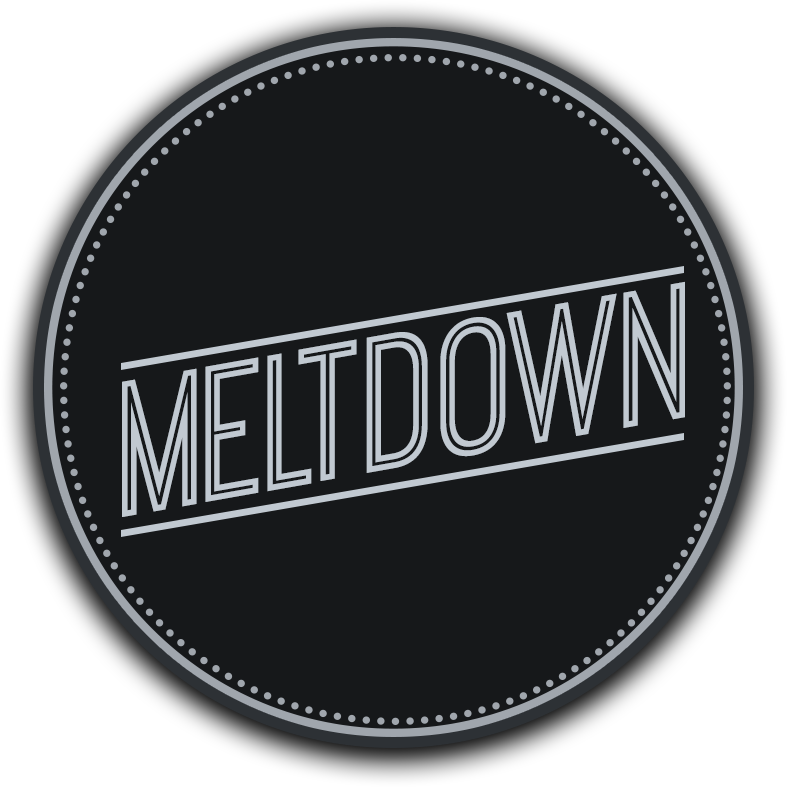
<style>
.page{position:relative;width:787px;height:787px;background:#16181a}
.page>*{position:absolute;margin:0}
.t1{font:200.4px "OstrichSansInline-Regular";color:#c1c9d1}
</style>
<div class="page">
<p class="t1" style="left:122px;top:281px;width:563px;height:236px;rotate:-10deg">MELTDOWN</p>
</div>
